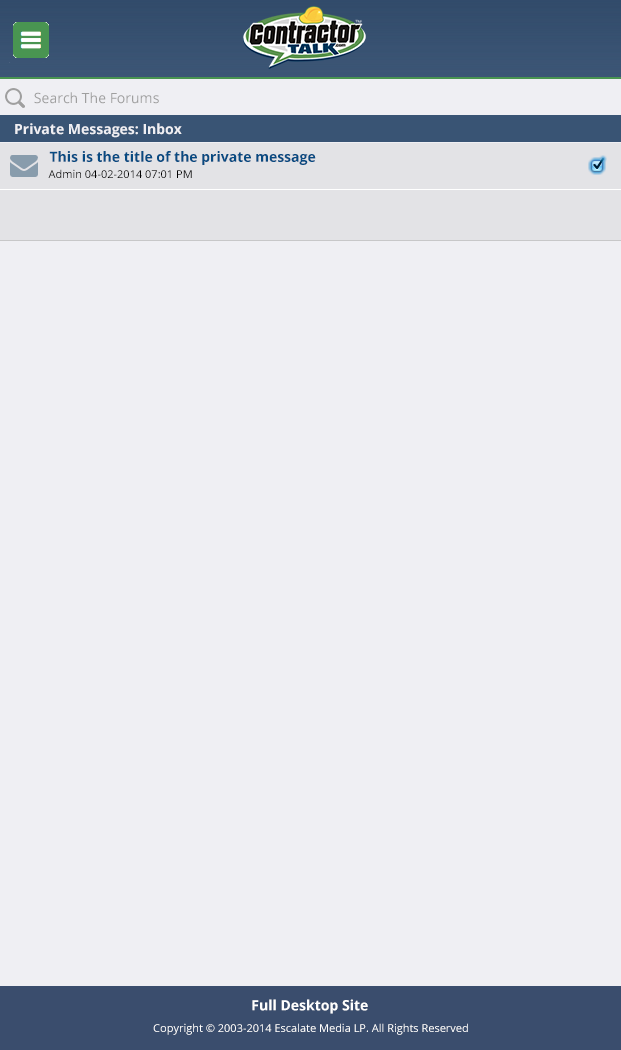
<style>
.page{position:relative;width:621px;height:1050px;background:#efeff3}
.page>*{position:absolute;margin:0}
.t1{font:14px "OpenSans";color:#9f9f9f}
.t2{font:14px "OpenSans-Bold";color:#efeff3}
.t3{font:14px "OpenSans-Bold";color:#084b82}
.t4{font:11px "OpenSans";color:#010101}
.t5{font:14px "OpenSans-Bold";color:#ffffff}
.t6{font:11px "OpenSans";color:#ffffff}
</style>
<div class="page">
<p class="t1" style="left:34px;top:92px;width:125px;height:12px">Search The Forums</p>
<p class="t2" style="left:15px;top:123px;width:167px;height:15px">Private Messages: Inbox</p>
<p class="t3" style="left:49px;top:151px;width:267px;height:14px">This is the title of the private message</p>
<p class="t4" style="left:48px;top:169px;width:144px;height:9px">Admin 04-02-2014 07:01 PM</p>
<p class="t5" style="left:252px;top:999px;width:116px;height:15px">Full Desktop Site</p>
<p class="t6" style="left:153px;top:1023px;width:315px;height:12px">Copyright © 2003-2014 Escalate Media LP. All Rights Reserved</p>
</div>
